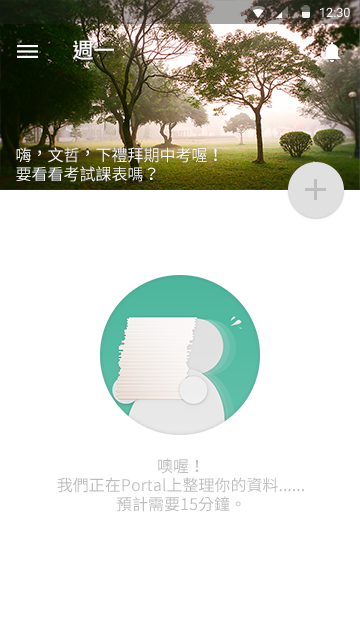
<style>
.page{position:relative;width:360px;height:640px;background:#ffffff}
.page>*{position:absolute;margin:0}
.t1{font:12.7px "Roboto-Regular";color:#ffffff}
.t2{font:21.3px "SourceHanSansTWHK-Medium";color:#ffffff}
.t3{font:16px "SourceHanSansTWHK-Normal";color:#ffffff}
.t4{font:16px "SourceHanSansTWHK-Regular";color:#bdbdbd}
</style>
<div class="page">
<p class="t1" style="left:320px;top:7px;width:30px;height:10px">12:30</p>
<p class="t2" style="left:73px;top:40px;width:41px;height:20px">週一</p>
<p class="t3" style="left:16px;top:147px;width:201px;height:35px">嗨，文哲，下禮拜期中考喔！<br>要看看考試課表嗎？</p>
<p class="t4" style="left:57px;top:458px;width:247px;height:54px;text-align:center">噢喔！<br>我們正在Portal上整理你的資料......<br>預計需要15分鐘。</p>
</div>
